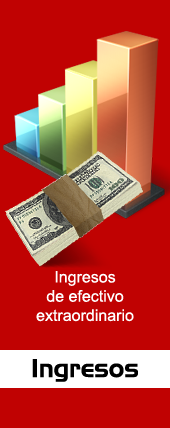
<style>
.page{position:relative;width:170px;height:428px;background:#c00202}
.page>*{position:absolute;margin:0}
.t1{font:16px "ArialMT";color:#ffffff}
.t2{font:25px "AeroRegularSWFTE";color:#000000}
</style>
<div class="page">
<p class="t1" style="left:36px;top:271px;width:98px;height:51px;text-align:center">Ingresos<br>de efectivo<br>extraordinario</p>
<p class="t2" style="left:32px;top:359px;width:106px;height:23px">Ingresos</p>
</div>
